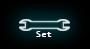
<style>
.page{position:relative;width:90px;height:49px}
.page>*{position:absolute;margin:0}
.t1{font:9px "Consolas";letter-spacing:0.05em;color:#ffffff}
</style>
<div class="page">
<p class="t1" style="left:36px;top:31px;width:16px;height:6px">Set</p>
</div>
